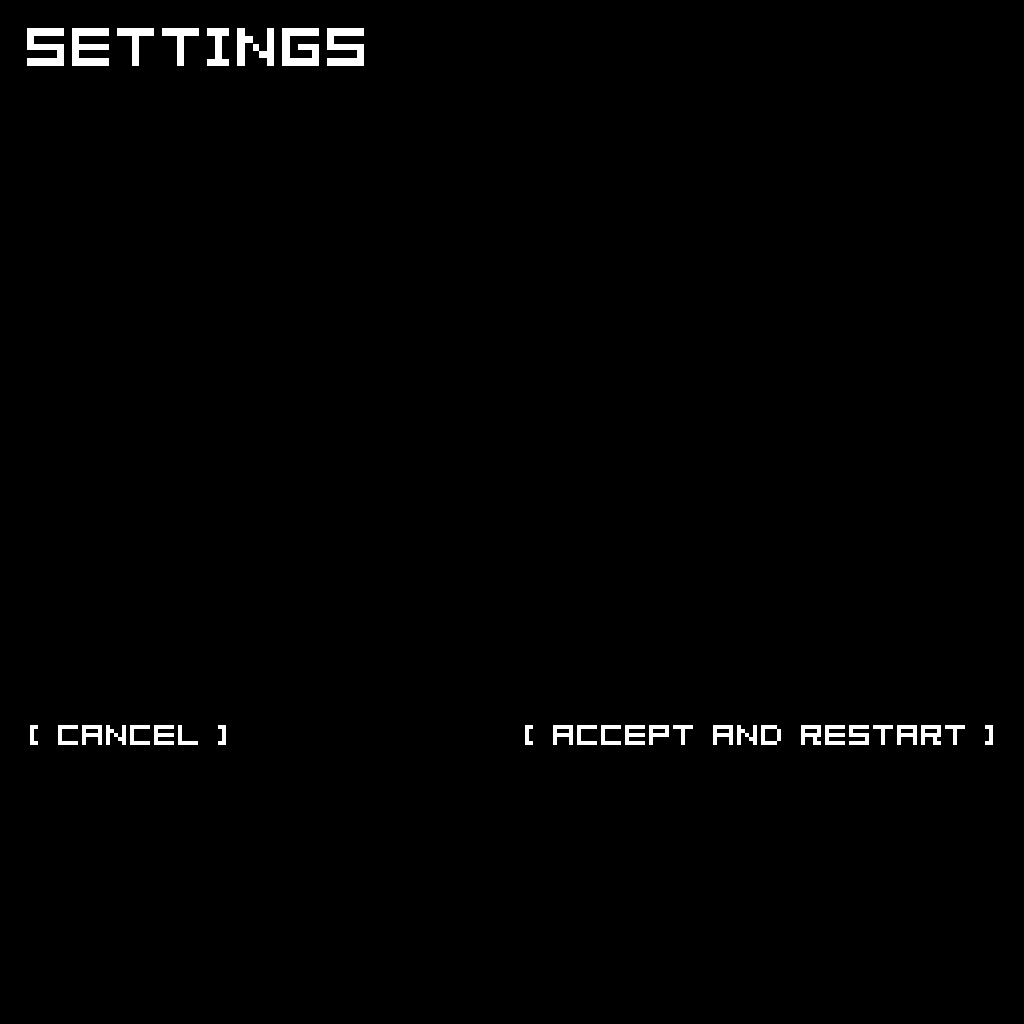
<style>
.page{position:relative;width:1024px;height:1024px;background:#000000}
.page>*{position:absolute;margin:0}
.t1{font:60px "04b08";color:#ffffff}
.t2{font:32px "04b08";color:#ffffff}
</style>
<div class="page">
<p class="t1" style="left:27px;top:28px;width:337px;height:38px">Settings</p>
<p class="t2" style="left:30px;top:725px;width:196px;height:20px">[ Cancel ]</p>
<p class="t2" style="left:525px;top:725px;width:468px;height:20px">[ Accept and Restart ]</p>
</div>
